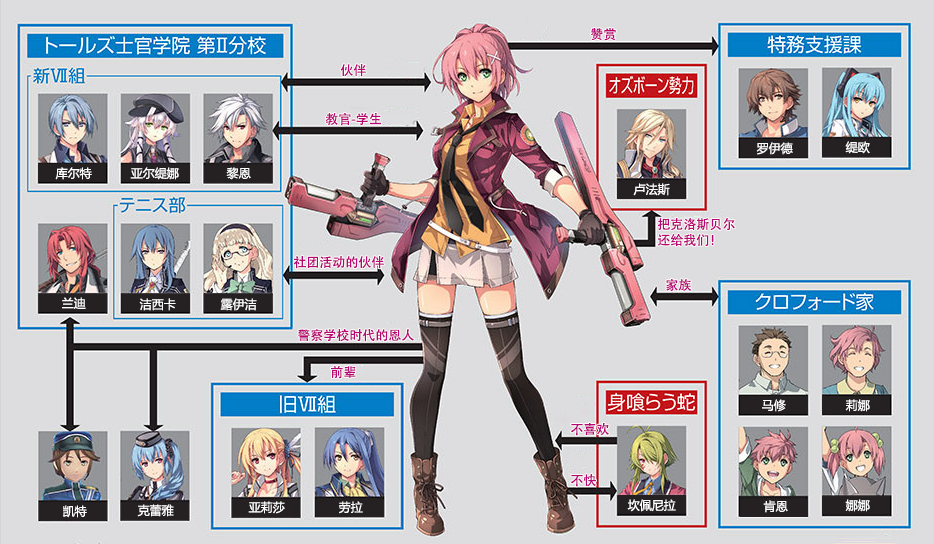
<style>
.page{position:relative;width:934px;height:544px;background:#dddddf}
.page>*{position:absolute;margin:0}
.t1{font:13px "AdobeHeitiStd-Regular";color:#b70773}
.t2{font:12px "MicrosoftYaHei";color:#ffffff}
.t3{font:13px/16px "AdobeHeitiStd-Regular";color:#b70773}
</style>
<div class="page">
<p class="t1" style="left:590px;top:28px;width:26px;height:13px">赞赏</p>
<p class="t1" style="left:340px;top:64px;width:26px;height:13px">伙伴</p>
<p class="t1" style="left:325px;top:113px;width:56px;height:13px">教官-学生</p>
<p class="t2" style="left:756px;top:142px;width:37px;height:13px">罗伊德</p>
<p class="t2" style="left:845px;top:141px;width:25px;height:13px">缇欧</p>
<p class="t2" style="left:55px;top:167px;width:37px;height:13px">库尔特</p>
<p class="t2" style="left:130px;top:167px;width:49px;height:13px">亚尔缇娜</p>
<p class="t2" style="left:226px;top:167px;width:25px;height:13px">黎恩</p>
<p class="t2" style="left:633px;top:183px;width:37px;height:13px">卢法斯</p>
<p class="t3" style="left:657px;top:218px;width:78px;height:29px">把克洛斯贝尔<br>还给我们！</p>
<p class="t1" style="left:293px;top:256px;width:91px;height:13px">社团活动的伙伴</p>
<p class="t1" style="left:666px;top:279px;width:25px;height:12px">家族</p>
<p class="t2" style="left:62px;top:297px;width:24px;height:12px">兰迪</p>
<p class="t2" style="left:139px;top:298px;width:37px;height:13px">洁西卡</p>
<p class="t2" style="left:220px;top:298px;width:37px;height:13px">露伊洁</p>
<p class="t1" style="left:298px;top:329px;width:116px;height:13px">警察学校时代的恩人</p>
<p class="t1" style="left:331px;top:366px;width:25px;height:13px">前辈</p>
<p class="t2" style="left:762px;top:399px;width:24px;height:13px">马修</p>
<p class="t2" style="left:845px;top:399px;width:25px;height:13px">莉娜</p>
<p class="t1" style="left:571px;top:423px;width:38px;height:13px">不喜欢</p>
<p class="t1" style="left:571px;top:474px;width:25px;height:13px">不快</p>
<p class="t2" style="left:63px;top:505px;width:24px;height:13px">凯特</p>
<p class="t2" style="left:137px;top:504px;width:37px;height:13px">克蕾雅</p>
<p class="t2" style="left:248px;top:501px;width:37px;height:13px">亚莉莎</p>
<p class="t2" style="left:339px;top:501px;width:24px;height:13px">劳拉</p>
<p class="t2" style="left:627px;top:499px;width:49px;height:13px">坎佩尼拉</p>
<p class="t2" style="left:763px;top:500px;width:25px;height:13px">肯恩</p>
<p class="t2" style="left:845px;top:499px;width:25px;height:13px">娜娜</p>
</div>
